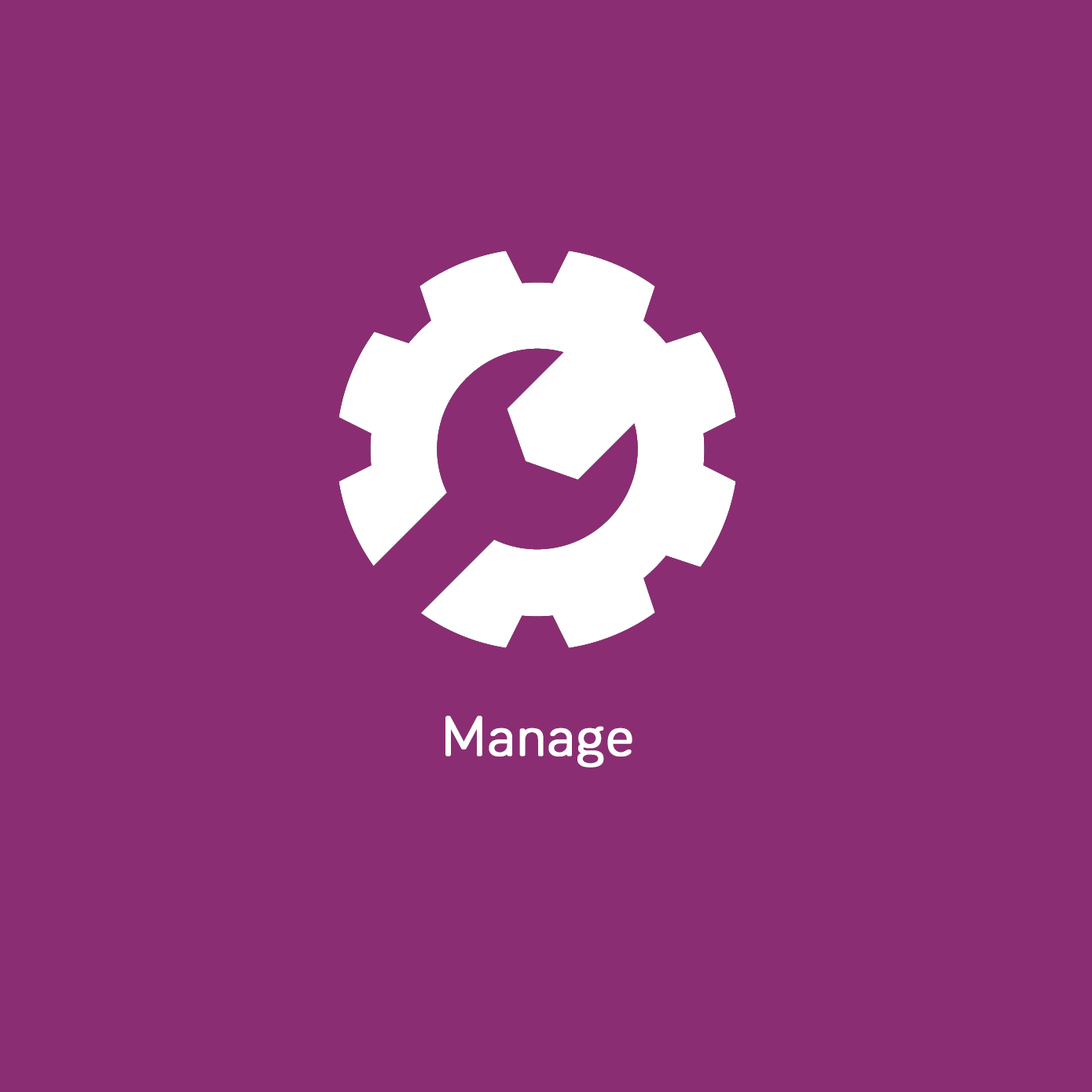
<style>
.page{position:relative;width:1092px;height:1092px;background:#8b2d73}
.page>*{position:absolute;margin:0}
.t1{font:57.3px "Bariol-Regular";letter-spacing:0.01em;color:#ffffff;font-weight:bold}
</style>
<div class="page">
<p class="t1" style="left:445px;top:716px;width:187px;height:52px">Manage</p>
</div>
